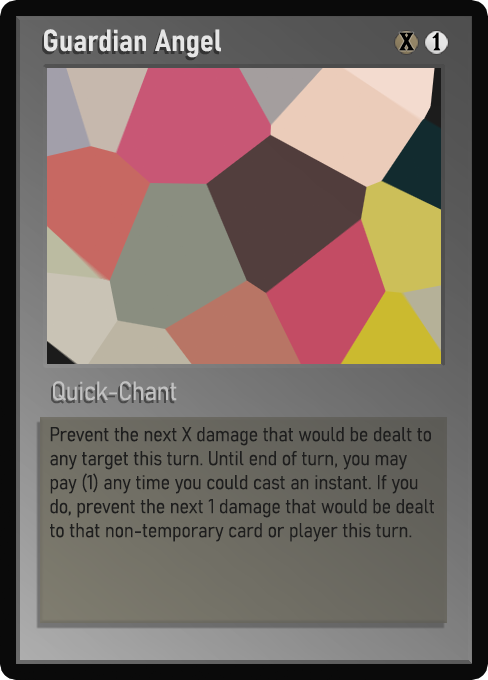
<style>
.page{position:relative;width:488px;height:680px}
.page>*{position:absolute;margin:0}
.t1{font:30px "Bahnschrift-SemiBoldSemiCondensed";color:#f2f2f2;font-weight:bold}
.t2{font:25px "WTRRoycroft";color:#000000;font-weight:bold;scale:1.09 1}
.t3{font:26px "Bahnschrift-LightSemiCondensed";color:#c8c8c8;font-weight:bold}
.t4{font:20px "Bahnschrift-LightSemiCondensed";color:#1e1e1e;font-weight:bold}
</style>
<div class="page">
<p class="t1" style="left:44px;top:29px;width:177px;height:29px;opacity:0.9">Guardian Angel</p>
<p class="t2" style="left:399px;top:32px;width:15px;height:19px">X</p>
<p class="t2" style="left:432px;top:32px;width:9px;height:19px">1</p>
<p class="t3" style="left:53px;top:381px;width:124px;height:20px;opacity:0.9">Quick-Chant</p>
<p class="t4" style="left:50px;top:427px;width:384px;height:115px">Prevent the next X damage that would be dealt to any target this turn. Until end of turn, you may pay (1) any time you could cast an instant. If you do, prevent the next 1 damage that would be dealt to that non-temporary card or player this turn.</p>
</div>
